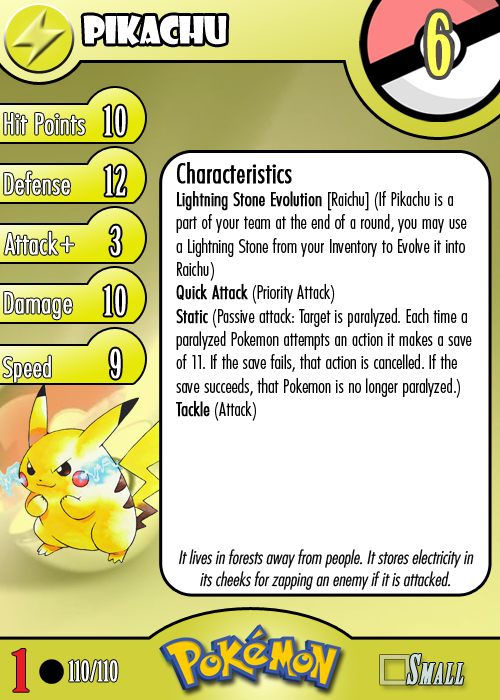
<style>
.page{position:relative;width:500px;height:700px;background:#ffffff}
.page>*{position:absolute;margin:0}
.t1{font:36.7px "ShowcardGothic-Reg";letter-spacing:-0.025em;color:#ffffff;scale:0.91 1}
.t2{font:83.3px "BirchStd";letter-spacing:0.025em;color:#fffd59;font-weight:bold}
.t3{font:27.8px "Futura-CondensedLight";color:#ffffff;font-weight:bold}
.t4{font:38.9px "BirchStd";letter-spacing:0.035em;color:#ffffff;font-weight:bold}
.t5{font:19.4px "FuturaCondensedBQ-Light";color:#010101}
.t6{font:27.8px "FuturaCondensedBQ-Light";color:#010101;font-weight:bold}
.t7{font:19.4px "FuturaCondensedBQ-Light";color:#010101;font-weight:bold}
.t8{font:30.6px "Futura-CondensedLight";color:#ffffff;font-weight:bold}
.t9{font:27.8px "FuturaCondensedBQ-Light";color:#ffffff;font-weight:bold}
.t10{font:18.1px "Futura-CondensedLight";color:#010101;font-style:italic}
.t11{font:55.6px "BirchStd";color:#ed1c24;font-weight:bold;scale:1.5 1}
.t12{font:27.8px "BirchStd";color:#ffffff;font-weight:bold}
</style>
<div class="page">
<p class="t1" style="left:83px;top:15px;width:144px;height:30px">pikachu</p>
<p class="t2" style="left:427px;top:12px;width:24px;height:64px">6</p>
<p class="t3" style="left:4px;top:113px;width:81px;height:22px">Hit Points</p>
<p class="t4" style="left:104px;top:105px;width:22px;height:31px">10</p>
<p class="t3" style="left:4px;top:171px;width:66px;height:24px">Defense</p>
<p class="t4" style="left:105px;top:165px;width:21px;height:31px">12</p>
<p class="t5" style="left:176px;top:162px;width:296px;height:259px"><span class="t6">Characteristics<br></span><span class="t7">Lightning Stone Evolution </span>[Raichu] (If Pikachu is a part of your team at the end of a round, you may use a Lightning Stone from your Inventory to Evolve it into Raichu)<br><span class="t7">Quick Attack</span> (Priority Attack)<br><span class="t7">Static</span> (Passive attack: Target is paralyzed. Each time a paralyzed Pokemon attempts an action it makes a save of 11. If the save fails, that action is cancelled. If the save succeeds, that Pokemon is no longer paralyzed.)<br><span class="t7">Tackle</span> (Attack)</p>
<p class="t3" style="left:4px;top:231px;width:54px;height:24px">Attack</p>
<p class="t4" style="left:110px;top:225px;width:11px;height:31px">3</p>
<p class="t8" style="left:60px;top:236px;width:14px;height:17px">+</p>
<p class="t3" style="left:4px;top:292px;width:68px;height:28px">Damage</p>
<p class="t4" style="left:104px;top:285px;width:22px;height:31px">10</p>
<p class="t4" style="left:110px;top:348px;width:11px;height:31px">9</p>
<p class="t9" style="left:3px;top:355px;width:48px;height:28px">Speed</p>
<p class="t10" style="left:179px;top:549px;width:295px;height:41px;text-align:center">It lives in forests away from people. It stores electricity in its cheeks for zapping an enemy if it is attacked.</p>
<p class="t11" style="left:12px;top:649px;width:17px;height:43px">1</p>
<p class="t12" style="left:68px;top:660px;width:50px;height:22px">110/110</p>
</div>
